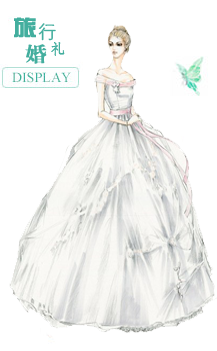
<style>
.page{position:relative;width:217px;height:351px;background:#ffffff}
.page>*{position:absolute;margin:0}
.t1{font:21.9px "JZhongYi";letter-spacing:0.05em;color:#43ae9e;font-weight:bold;scale:1.06 1}
.t2{font:18px "JXiDengXian";letter-spacing:0.05em;color:#43ae9e;font-weight:bold}
.t3{font:20.3px "Jxiaobiaosong";letter-spacing:0.05em;color:#43ae9e;font-weight:bold}
.t4{font:14.7px "STFangsong";letter-spacing:0.05em;color:#43ae9e;font-weight:bold}
</style>
<div class="page">
<p class="t1" style="left:14px;top:17px;width:22px;height:21px">旅</p>
<p class="t2" style="left:38px;top:23px;width:18px;height:18px">行</p>
<p class="t3" style="left:25px;top:44px;width:22px;height:20px">婚</p>
<p class="t4" style="left:51px;top:42px;width:14px;height:14px">礼</p>
</div>
